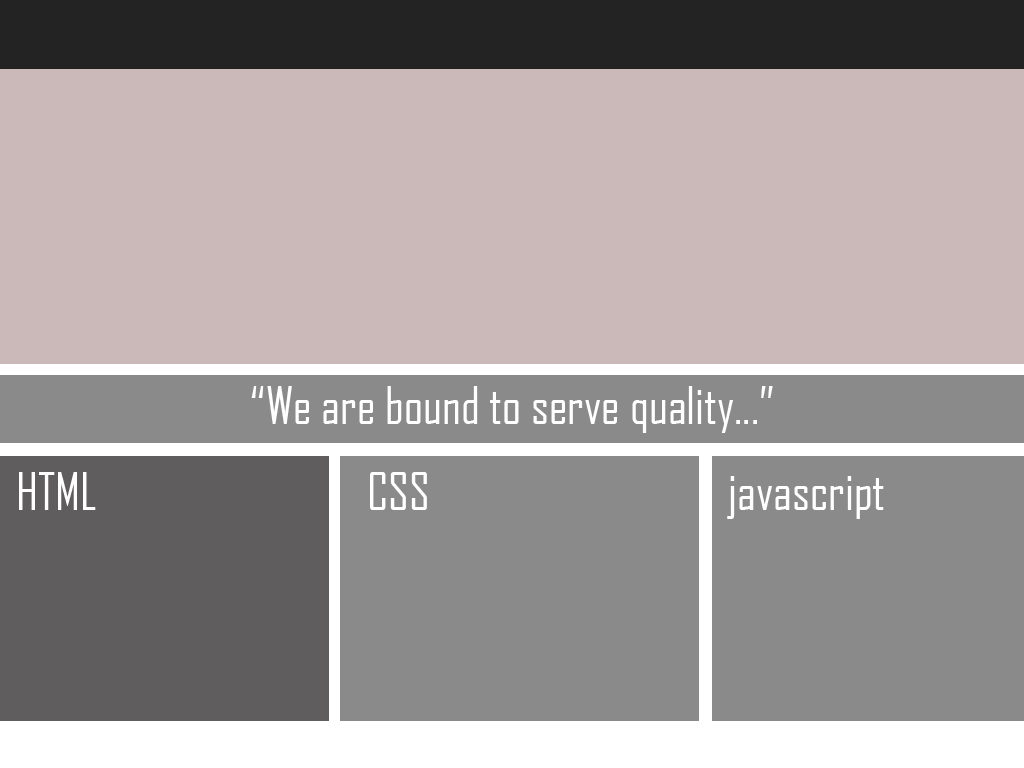
<style>
.page{position:relative;width:1024px;height:768px;background:#cbb9b9}
.page>*{position:absolute;margin:0}
.t1{font:50px "AgencyFB-Reg";color:#ffffff}
</style>
<div class="page">
<p class="t1" style="left:251px;top:386px;width:522px;height:47px">“We are bound to serve quality...”</p>
<p class="t1" style="left:19px;top:472px;width:77px;height:38px">HTML</p>
<p class="t1" style="left:370px;top:472px;width:57px;height:38px">CSS</p>
<p class="t1" style="left:727px;top:476px;width:157px;height:43px">javascript</p>
</div>
